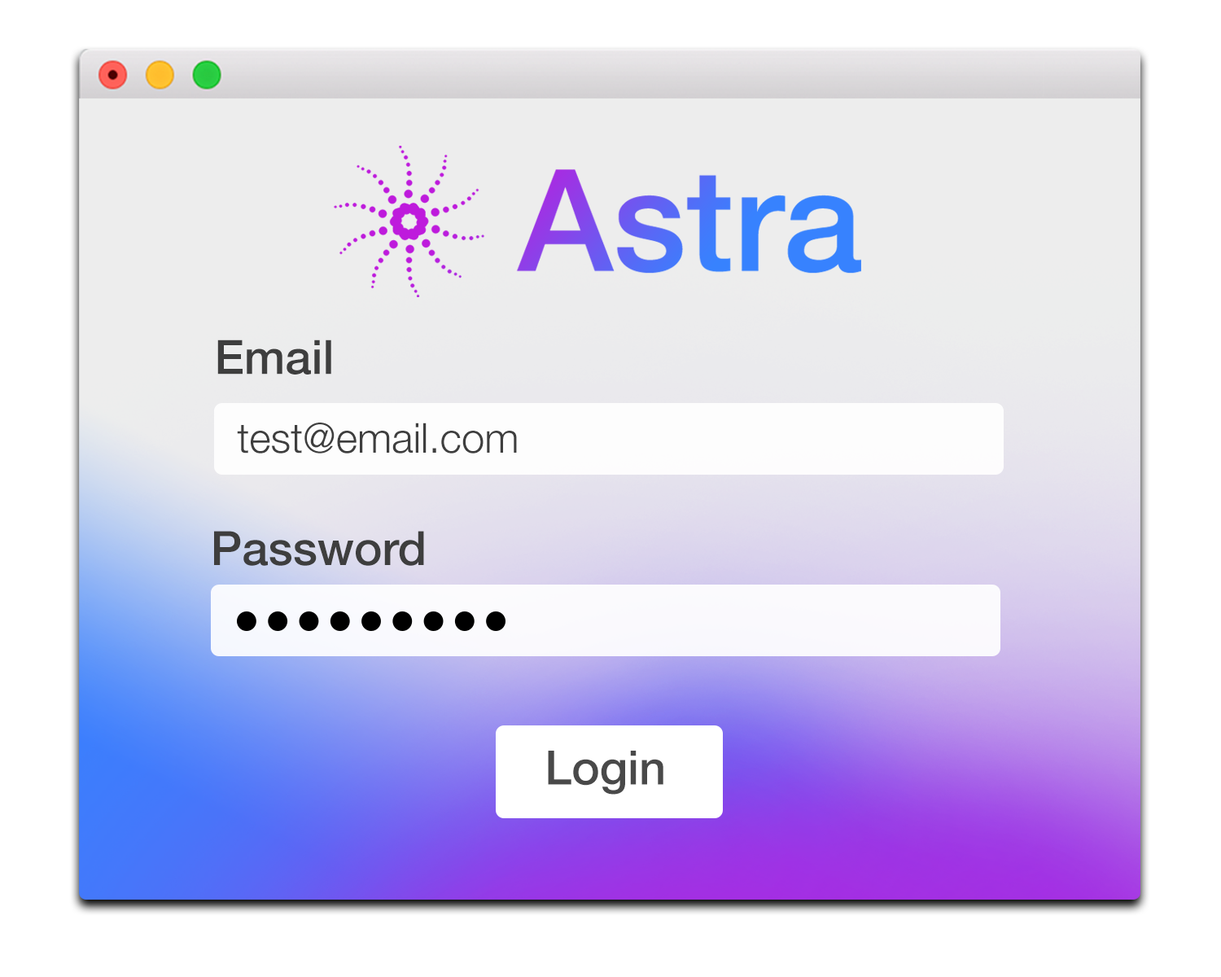
<style>
.page{position:relative;width:1221px;height:977px;background:#ffffff}
.page>*{position:absolute;margin:0}
.t1{font:47.3px "HelveticaNeue-Medium";color:#3e3e3e}
.t2{font:41.3px "HelveticaNeue-Light";color:#3e3e3e}
.t3{font:47.3px "HelveticaNeue-Medium";color:#494949}
</style>
<div class="page">
<p class="t1" style="left:217px;top:339px;width:114px;height:35px">Email</p>
<p class="t2" style="left:237px;top:422px;width:280px;height:31px">test@email.com</p>
<p class="t1" style="left:214px;top:531px;width:210px;height:35px">Password</p>
<p class="t3" style="left:548px;top:750px;width:115px;height:44px">Login</p>
</div>
